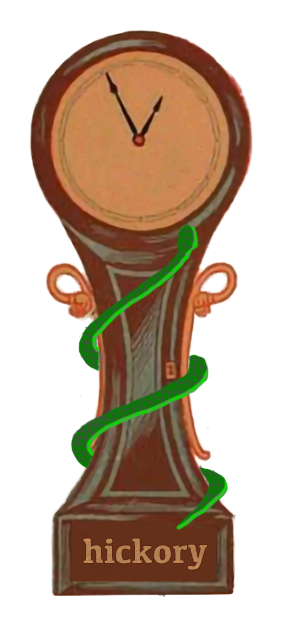
<style>
.page{position:relative;width:283px;height:624px;background:#ffffff}
.page>*{position:absolute;margin:0}
.t1{font:35px "Kefa-Bold";color:#c98a54}
</style>
<div class="page">
<p class="t1" style="left:83px;top:538px;width:124px;height:32px;rotate:-1deg">hickory</p>
</div>
